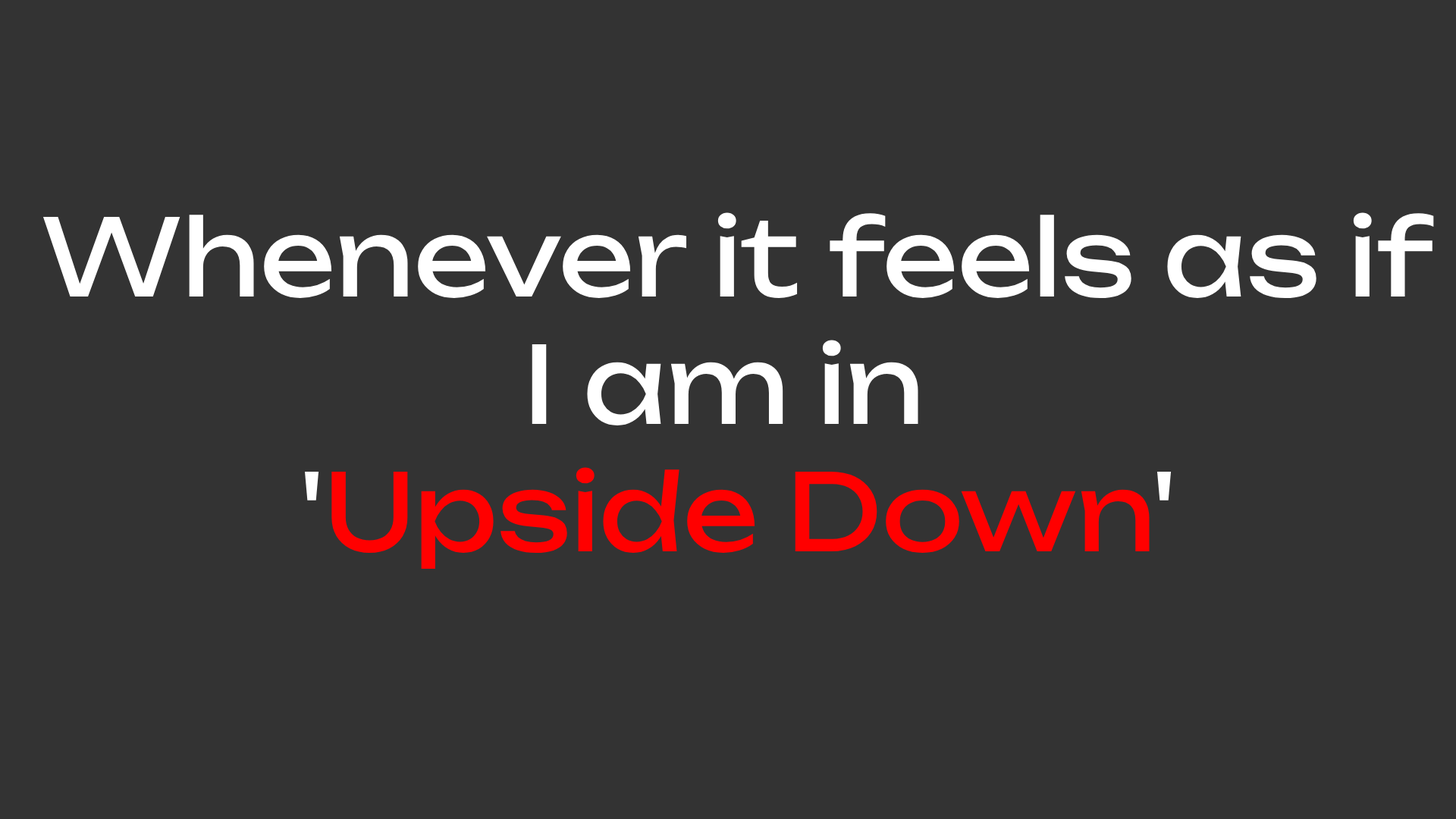
<style>
.page{position:relative;width:1456px;height:819px;background:#333333}
.page>*{position:absolute;margin:0}
.t1{font:106.2px "Unbounded-Regular";color:#ffffff}
.t2{font:106.2px "Unbounded-Regular";color:#ff0000}
</style>
<div class="page">
<p class="t1" style="left:42px;top:212px;width:1392px;height:358px;text-align:center">Whenever it feels as if<br>I am in <br>'<span class="t2">Upside Down</span>'</p>
</div>
